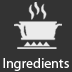
<style>
.page{position:relative;width:72px;height:72px;background:#333333}
.page>*{position:absolute;margin:0}
.t1{font:14px "MyriadPro-Regular";color:#ffffff}
</style>
<div class="page">
<p class="t1" style="left:3px;top:58px;width:66px;height:13px">Ingredients</p>
</div>
